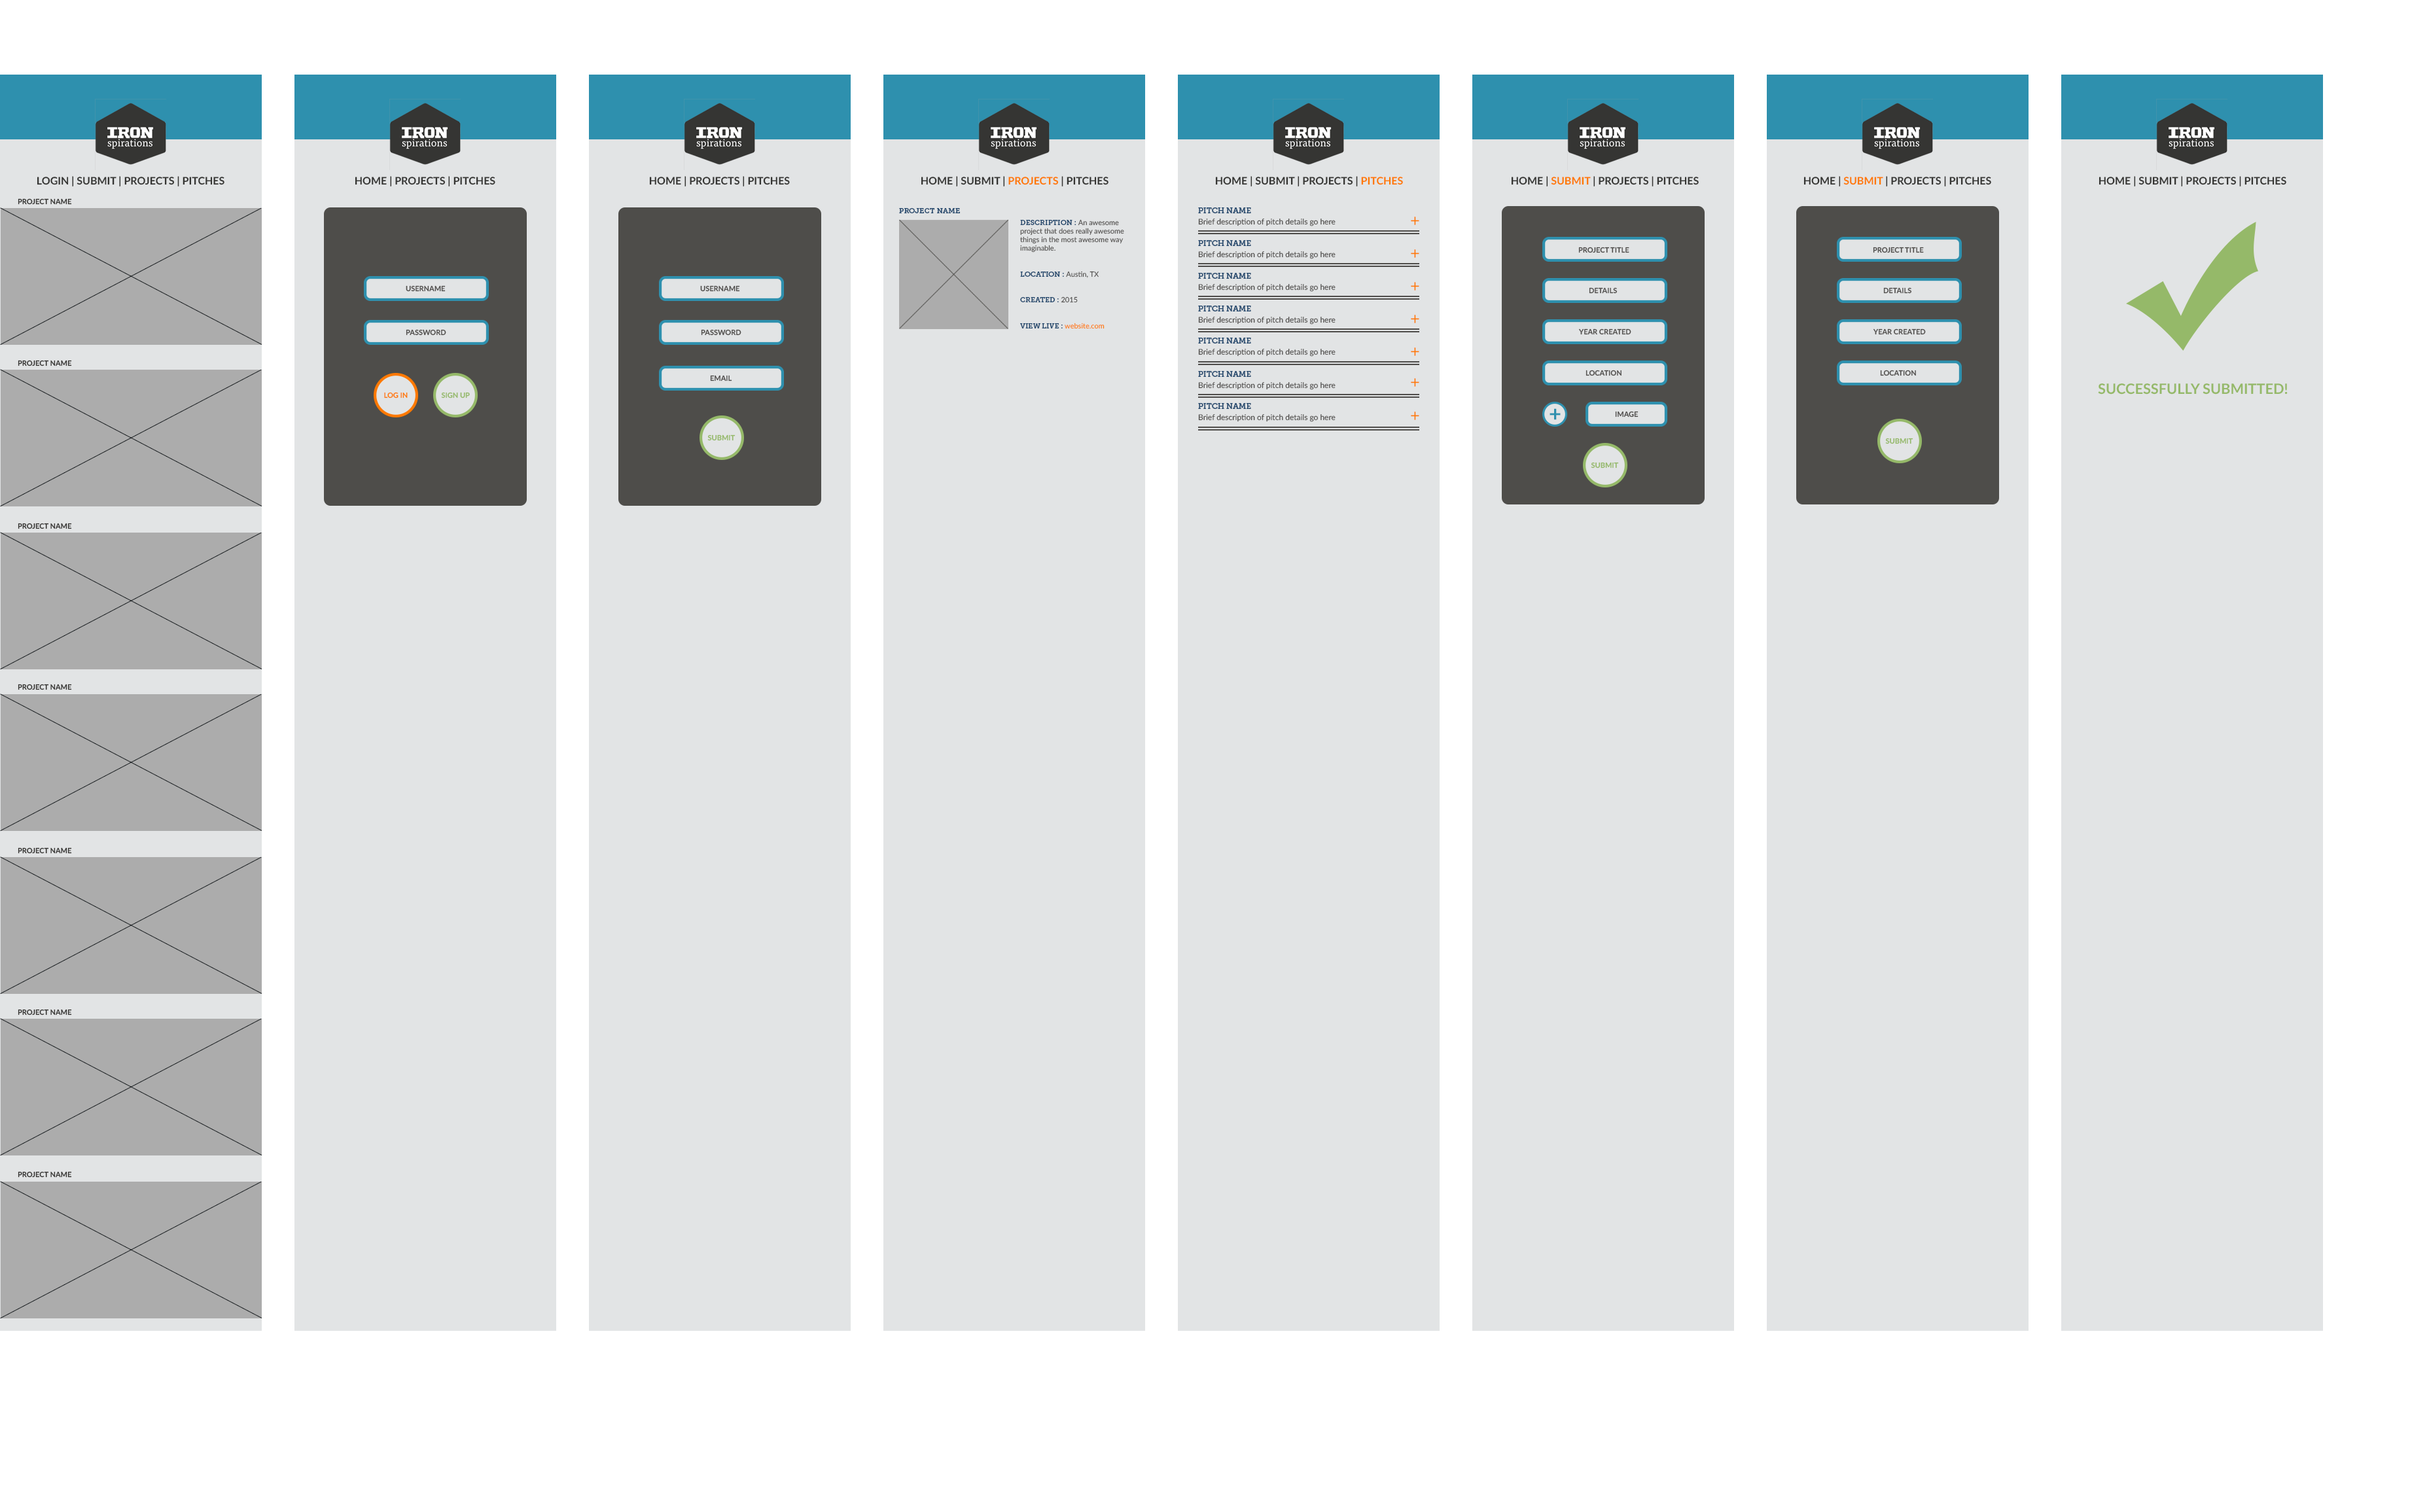
<style>
.page{position:relative;width:2429px;height:1497px;background:#e2e4e5}
.page>*{position:absolute;margin:0}
.t1{font:10.5px "Lato-Bold";color:#353533}
.t2{font:10.5px "Lato-Bold";color:#fe7902}
.t3{font:7.2px "Lato-Bold";color:#353432}
.t4{font:7.4px "MuseoSlab-700";color:#2c4e71}
.t5{font:7.9px "MuseoSlab-700";color:#2c4e71}
.t6{font:7.2px "Lato-Regular";color:#4f4d4b}
.t7{font:7.2px "MuseoSlab-700";color:#2c4e71}
.t8{font:7.2px "Lato-Regular";color:#fe7902}
.t9{font:7.9px "Lato-Regular";color:#4f4d4b}
.t10{font:16.7px "Lato-Regular";color:#fe7902}
.t11{font:7.2px "Lato-Bold";color:#4f4d4b}
.t12{font:14.2px "Lato-Bold";color:#95b969}
.t13{font:7.2px "Lato-Bold";color:#fe7902}
.t14{font:7.2px "Lato-Bold";color:#95b969}
.t15{font:21.6px "Lato-Bold";color:#2e90ae}
</style>
<div class="page">
<p class="t1" style="left:37px;top:176px;width:187px;height:11px">LOGIN | SUBMIT | PROJECTS | PITCHES</p>
<p class="t1" style="left:355px;top:176px;width:140px;height:11px">HOME | PROJECTS | PITCHES</p>
<p class="t1" style="left:649px;top:176px;width:141px;height:11px">HOME | PROJECTS | PITCHES</p>
<p class="t1" style="left:921px;top:176px;width:188px;height:11px">HOME | SUBMIT | <span class="t2">PROJECTS </span>| PITCHES</p>
<p class="t1" style="left:1215px;top:176px;width:188px;height:11px">HOME | SUBMIT | PROJECTS | <span class="t2">PITCHES</span></p>
<p class="t1" style="left:1511px;top:176px;width:188px;height:11px">HOME | <span class="t2">SUBMIT </span>| PROJECTS | PITCHES</p>
<p class="t1" style="left:1804px;top:176px;width:188px;height:11px">HOME | <span class="t2">SUBMIT </span>| PROJECTS | PITCHES</p>
<p class="t1" style="left:2099px;top:176px;width:188px;height:11px">HOME | SUBMIT | PROJECTS | PITCHES</p>
<p class="t3" style="left:18px;top:198px;width:54px;height:7px">PROJECT NAME</p>
<p class="t4" style="left:899px;top:208px;width:61px;height:5px">PROJECT NAME</p>
<p class="t5" style="left:1198px;top:207px;width:53px;height:6px">PITCH NAME</p>
<p class="t6" style="left:1020px;top:219px;width:104px;height:110px"><span class="t7">DESCRIPTION : </span>An awesome<br>project that does really awesome<br>things in the most awesome way<br>imaginable.<br><br><span class="t7"><br>LOCATION : </span>Austin, TX<br><span class="t7"><br><br>CREATED : </span>2015<br><br><span class="t7"><br>VIEW LIVE : </span><span class="t8">website.com</span></p>
<p class="t9" style="left:1198px;top:219px;width:138px;height:7px">Brief description of pitch details go here</p>
<p class="t10" style="left:1411px;top:217px;width:9px;height:8px">+</p>
<p class="t5" style="left:1198px;top:240px;width:53px;height:6px">PITCH NAME</p>
<p class="t9" style="left:1198px;top:251px;width:138px;height:8px">Brief description of pitch details go here</p>
<p class="t10" style="left:1411px;top:249px;width:9px;height:9px">+</p>
<p class="t11" style="left:1579px;top:247px;width:51px;height:6px">PROJECT TITLE</p>
<p class="t11" style="left:1873px;top:247px;width:51px;height:6px">PROJECT TITLE</p>
<p class="t5" style="left:1198px;top:273px;width:53px;height:6px">PITCH NAME</p>
<p class="t11" style="left:406px;top:285px;width:40px;height:7px">USERNAME</p>
<p class="t11" style="left:700px;top:285px;width:40px;height:7px">USERNAME</p>
<p class="t9" style="left:1198px;top:284px;width:138px;height:8px">Brief description of pitch details go here</p>
<p class="t10" style="left:1411px;top:282px;width:9px;height:9px">+</p>
<p class="t11" style="left:1589px;top:287px;width:29px;height:7px">DETAILS</p>
<p class="t11" style="left:1884px;top:287px;width:28px;height:7px">DETAILS</p>
<p class="t5" style="left:1198px;top:306px;width:53px;height:6px">PITCH NAME</p>
<p class="t9" style="left:1198px;top:317px;width:138px;height:8px">Brief description of pitch details go here</p>
<p class="t10" style="left:1411px;top:315px;width:9px;height:8px">+</p>
<p class="t11" style="left:406px;top:329px;width:40px;height:7px">PASSWORD</p>
<p class="t11" style="left:701px;top:329px;width:41px;height:7px">PASSWORD</p>
<p class="t11" style="left:1579px;top:329px;width:53px;height:6px">YEAR CREATED</p>
<p class="t11" style="left:1873px;top:329px;width:53px;height:6px">YEAR CREATED</p>
<p class="t5" style="left:1198px;top:338px;width:53px;height:6px">PITCH NAME</p>
<p class="t9" style="left:1198px;top:349px;width:138px;height:8px">Brief description of pitch details go here</p>
<p class="t10" style="left:1411px;top:348px;width:9px;height:8px">+</p>
<p class="t3" style="left:18px;top:360px;width:54px;height:7px">PROJECT NAME</p>
<p class="t11" style="left:710px;top:375px;width:22px;height:7px">EMAIL</p>
<p class="t5" style="left:1198px;top:371px;width:53px;height:6px">PITCH NAME</p>
<p class="t11" style="left:1586px;top:370px;width:36px;height:6px">LOCATION</p>
<p class="t11" style="left:1880px;top:370px;width:36px;height:6px">LOCATION</p>
<p class="t9" style="left:1198px;top:382px;width:138px;height:8px">Brief description of pitch details go here</p>
<p class="t10" style="left:1411px;top:378px;width:9px;height:9px">+</p>
<p class="t12" style="left:2098px;top:384px;width:190px;height:11px">SUCCESSFULLY SUBMITTED!</p>
<p class="t13" style="left:384px;top:392px;width:24px;height:7px">LOG IN</p>
<p class="t14" style="left:441px;top:392px;width:29px;height:7px">SIGN UP</p>
<p class="t5" style="left:1198px;top:403px;width:53px;height:6px">PITCH NAME</p>
<p class="t10" style="left:1411px;top:412px;width:9px;height:8px">+</p>
<p class="t15" style="left:1550px;top:408px;width:11px;height:12px">+</p>
<p class="t11" style="left:1615px;top:411px;width:24px;height:7px">IMAGE</p>
<p class="t9" style="left:1198px;top:414px;width:138px;height:8px">Brief description of pitch details go here</p>
<p class="t14" style="left:708px;top:435px;width:28px;height:6px">SUBMIT</p>
<p class="t14" style="left:1886px;top:438px;width:28px;height:6px">SUBMIT</p>
<p class="t14" style="left:1591px;top:462px;width:28px;height:7px">SUBMIT</p>
<p class="t3" style="left:18px;top:523px;width:54px;height:6px">PROJECT NAME</p>
<p class="t3" style="left:18px;top:684px;width:54px;height:6px">PROJECT NAME</p>
<p class="t3" style="left:18px;top:848px;width:54px;height:6px">PROJECT NAME</p>
<p class="t3" style="left:18px;top:1009px;width:54px;height:7px">PROJECT NAME</p>
<p class="t3" style="left:18px;top:1172px;width:54px;height:6px">PROJECT NAME</p>
</div>
